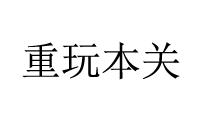
<style>
.page{position:relative;width:200px;height:122px;background:#ffffff}
.page>*{position:absolute;margin:0}
.t1{font:40px "SimSun";color:#000000}
</style>
<div class="page">
<p class="t1" style="left:22px;top:42px;width:158px;height:38px">重玩本关</p>
</div>
